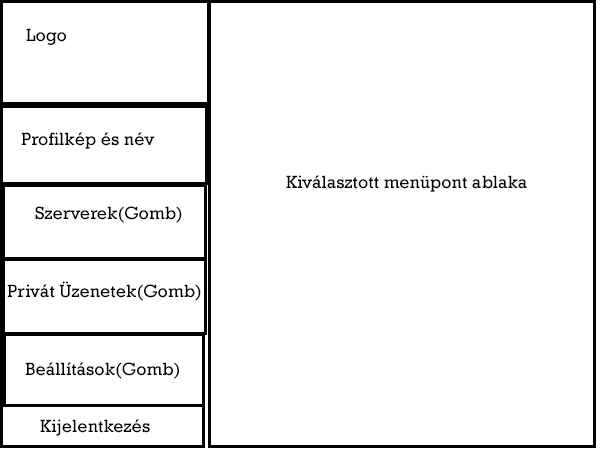
<style>
.page{position:relative;width:600px;height:450px;background:#ffffff}
.page>*{position:absolute;margin:0}
.t1{font:18px "Rockwell";color:#000000}
</style>
<div class="page">
<p class="t1" style="left:26px;top:28px;width:40px;height:17px">Logo</p>
<p class="t1" style="left:21px;top:132px;width:134px;height:17px">Profilkép és név</p>
<p class="t1" style="left:286px;top:175px;width:241px;height:17px">Kiválasztott menüpont ablaka</p>
<p class="t1" style="left:35px;top:206px;width:147px;height:17px">Szerverek(Gomb)</p>
<p class="t1" style="left:7px;top:281px;width:194px;height:20px">Privát Üzenetek(Gomb)</p>
<p class="t1" style="left:25px;top:362px;width:154px;height:17px">Beállítások(Gomb)</p>
<p class="t1" style="left:40px;top:419px;width:110px;height:17px">Kijelentkezés</p>
</div>
